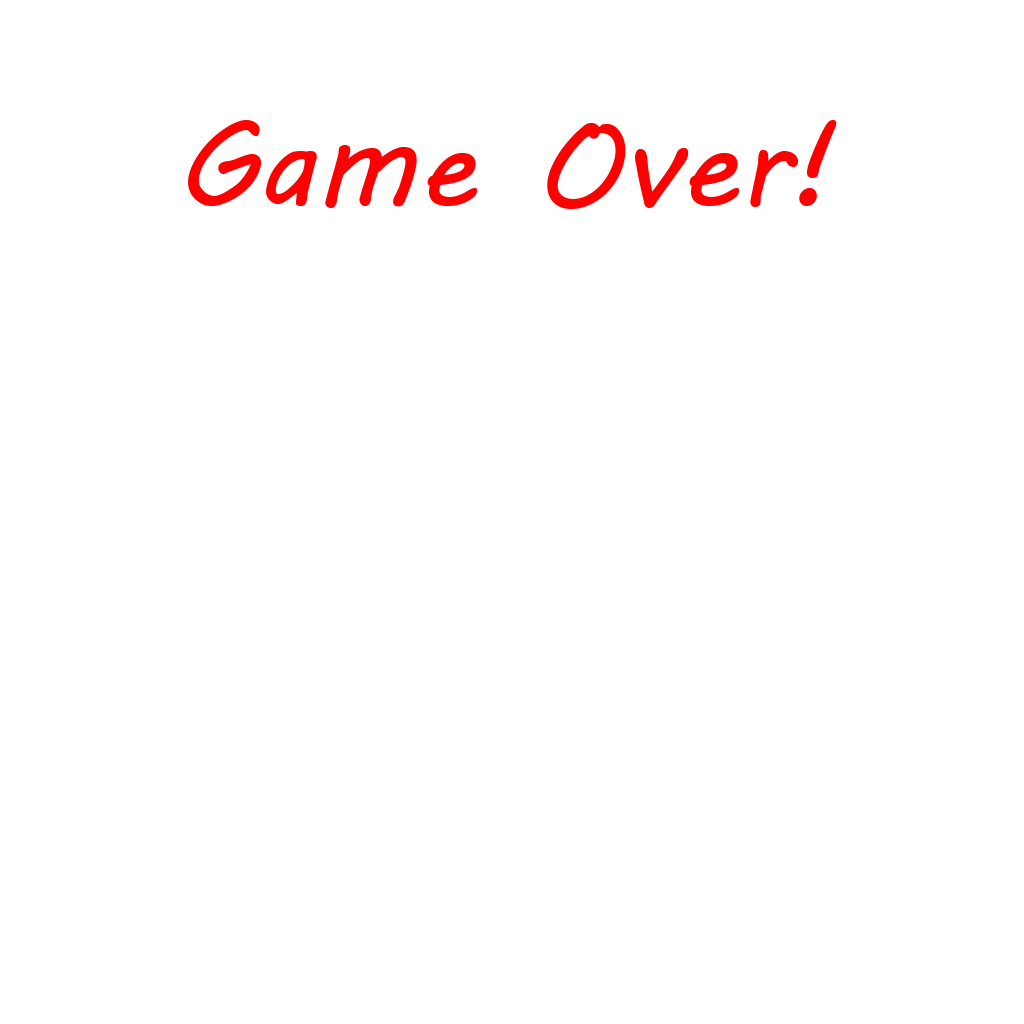
<style>
.page{position:relative;width:1024px;height:1024px;background:#ffffff}
.page>*{position:absolute;margin:0}
.t1{font:120px "MVBoli";color:#ff0000}
</style>
<div class="page">
<p class="t1" style="left:188px;top:120px;width:649px;height:89px">Game Over!</p>
</div>
